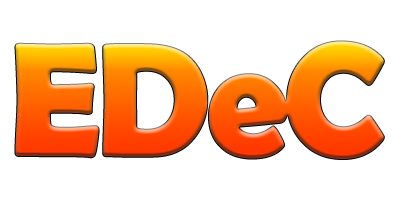
<style>
.page{position:relative;width:400px;height:200px;background:#ffffff}
.page>*{position:absolute;margin:0}
.t1{font:160px "BerlinSansFBDemi-Bold";letter-spacing:-0.05em;font-weight:bold}
</style>
<div class="page">
<p class="t1" style="left:14px;top:40px;width:371px;height:120px">EDeC</p>
</div>
